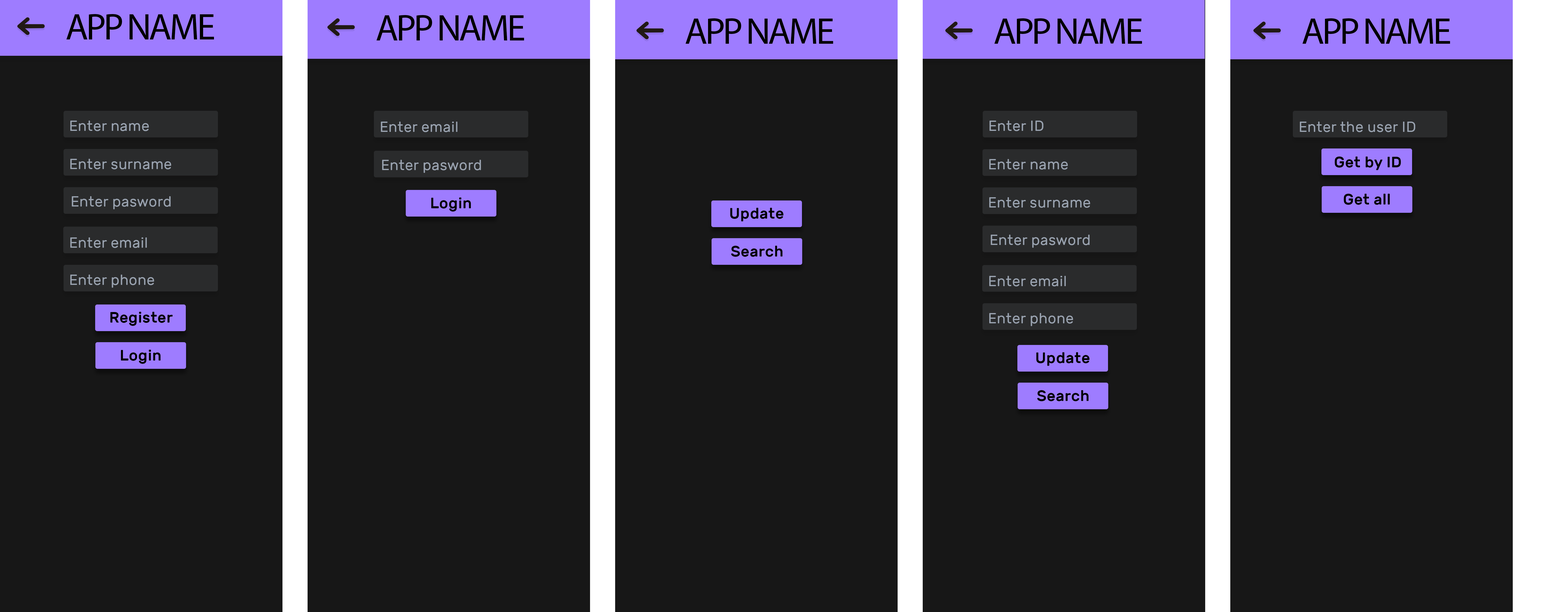
<style>
.page{position:relative;width:1568px;height:612px;background:#171717}
.page>*{position:absolute;margin:0}
.t1{font:37.2px "MyriadPro-Regular";letter-spacing:-0.06em;color:#000000}
.t2{font:37.2px "MyriadPro-Regular";letter-spacing:-0.06em;color:#010000}
.t3{font:14.6px "Rubik-Regular";letter-spacing:0.02em;color:#99a2af}
.t4{font:15.1px "Rubik-Medium";letter-spacing:0.02em;color:#000000}
</style>
<div class="page">
<p class="t1" style="left:66px;top:14px;width:148px;height:25px">APP NAME</p>
<p class="t1" style="left:376px;top:15px;width:148px;height:25px">APP NAME</p>
<p class="t2" style="left:685px;top:18px;width:148px;height:26px">APP NAME</p>
<p class="t1" style="left:994px;top:18px;width:148px;height:26px">APP NAME</p>
<p class="t1" style="left:1302px;top:18px;width:148px;height:26px">APP NAME</p>
<p class="t3" style="left:70px;top:121px;width:79px;height:10px">Enter name</p>
<p class="t3" style="left:381px;top:122px;width:76px;height:10px">Enter email</p>
<p class="t3" style="left:990px;top:121px;width:53px;height:10px">Enter ID</p>
<p class="t3" style="left:1300px;top:122px;width:115px;height:10px">Enter the user ID</p>
<p class="t3" style="left:70px;top:159px;width:101px;height:10px">Enter surname</p>
<p class="t3" style="left:382px;top:160px;width:99px;height:13px">Enter pasword</p>
<p class="t3" style="left:989px;top:159px;width:79px;height:10px">Enter name</p>
<p class="t4" style="left:1335px;top:156px;width:66px;height:14px">Get by ID</p>
<p class="t3" style="left:72px;top:196px;width:99px;height:13px">Enter pasword</p>
<p class="t4" style="left:431px;top:197px;width:40px;height:14px">Login</p>
<p class="t3" style="left:989px;top:197px;width:101px;height:11px">Enter surname</p>
<p class="t4" style="left:1344px;top:194px;width:46px;height:11px">Get all</p>
<p class="t4" style="left:730px;top:208px;width:53px;height:13px">Update</p>
<p class="t3" style="left:70px;top:237px;width:77px;height:11px">Enter email</p>
<p class="t4" style="left:731px;top:246px;width:52px;height:11px">Search</p>
<p class="t3" style="left:991px;top:235px;width:99px;height:13px">Enter pasword</p>
<p class="t3" style="left:70px;top:274px;width:84px;height:13px">Enter phone</p>
<p class="t3" style="left:989px;top:276px;width:77px;height:10px">Enter email</p>
<p class="t4" style="left:110px;top:312px;width:63px;height:14px">Register</p>
<p class="t3" style="left:989px;top:313px;width:84px;height:13px">Enter phone</p>
<p class="t4" style="left:121px;top:350px;width:40px;height:14px">Login</p>
<p class="t4" style="left:1036px;top:352px;width:53px;height:14px">Update</p>
<p class="t4" style="left:1037px;top:390px;width:52px;height:11px">Search</p>
</div>
